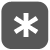
<style>
.page{position:relative;width:50px;height:50px;background:#575757}
.page>*{position:absolute;margin:0}
.t1{font:48px "Verdana-Bold";color:#ffffff}
</style>
<div class="page">
<p class="t1" style="left:13px;top:13px;width:26px;height:24px">*</p>
</div>
